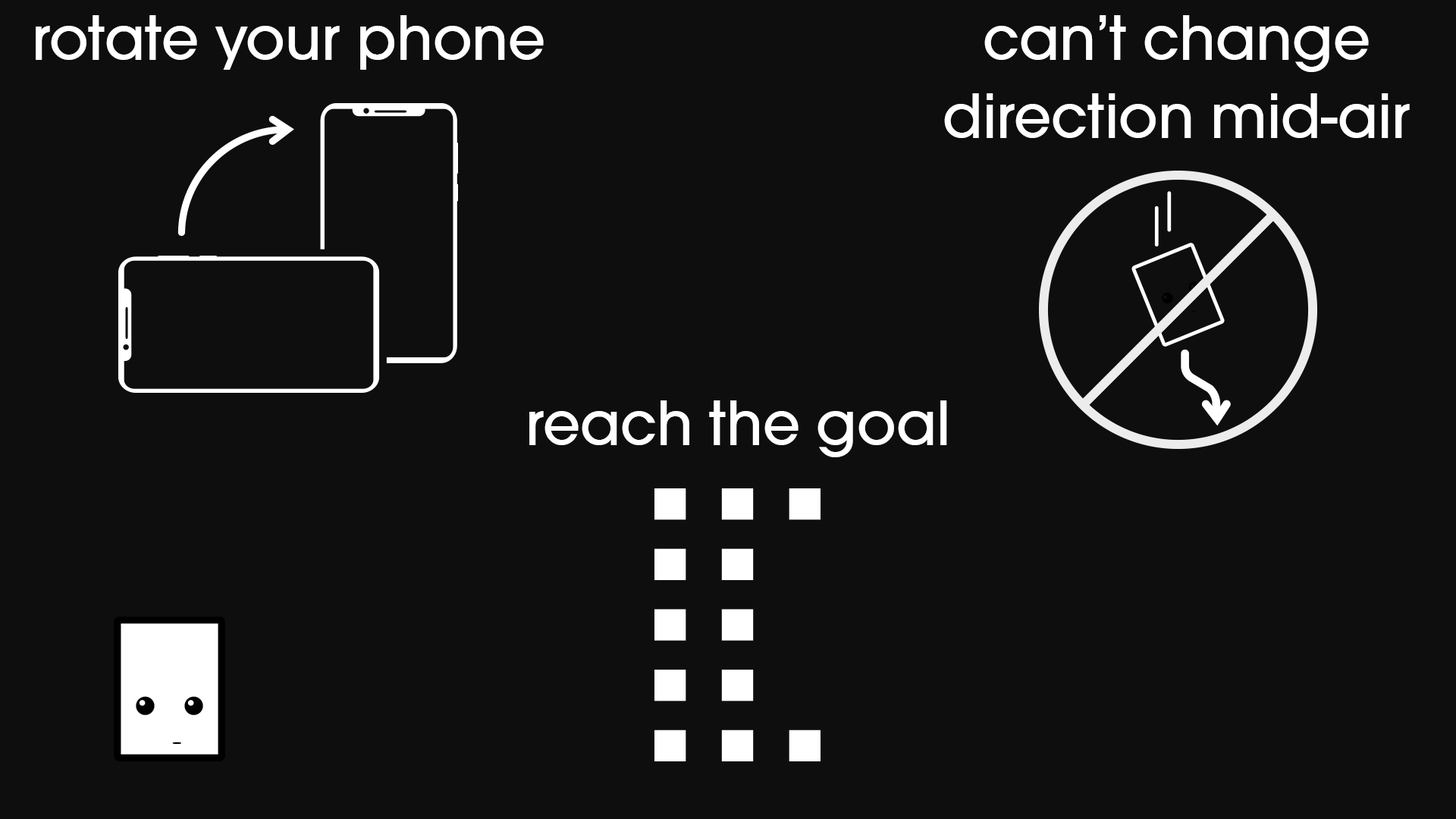
<style>
.page{position:relative;width:1456px;height:819px;background:#0f0e0e}
.page>*{position:absolute;margin:0}
.t1{font:65px "AvantGardeMdITCTT";color:#ffffff}
</style>
<div class="page">
<p class="t1" style="left:36px;top:15px;width:508px;height:55px">rotate your phone</p>
<p class="t1" style="left:944px;top:15px;width:466px;height:123px;text-align:center">can’t change<br>direction mid-air</p>
<p class="t1" style="left:529px;top:400px;width:418px;height:57px">reach the goal</p>
</div>
